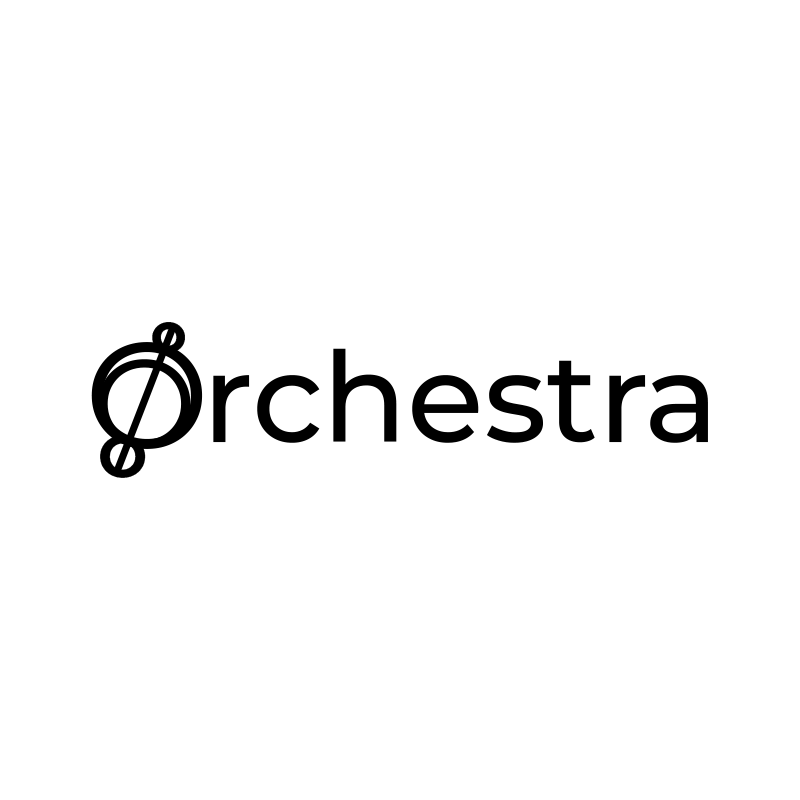
<style>
.page{position:relative;width:800px;height:800px;background:#ffffff}
.page>*{position:absolute;margin:0}
.t1{font:41.7px "MontserratRoman-ExtraBold";color:#000000}
.t2{font:150px "MontserratRoman-Regular";color:#000000}
.t3{font:125px "MontserratRoman-Medium";color:#000000}
.t4{font:125px "MontserratRoman-Regular";color:#000000}
.t5{font:58.3px "MontserratRoman-Bold";color:#000000}
</style>
<div class="page">
<p class="t1" style="left:152px;top:322px;width:33px;height:31px">O</p>
<p class="t2" style="left:91px;top:342px;width:112px;height:107px">O</p>
<p class="t3" style="left:213px;top:348px;width:495px;height:95px">rchestra</p>
<p class="t4" style="left:98px;top:359px;width:93px;height:90px">O</p>
<p class="t5" style="left:100px;top:435px;width:46px;height:43px">O</p>
</div>
